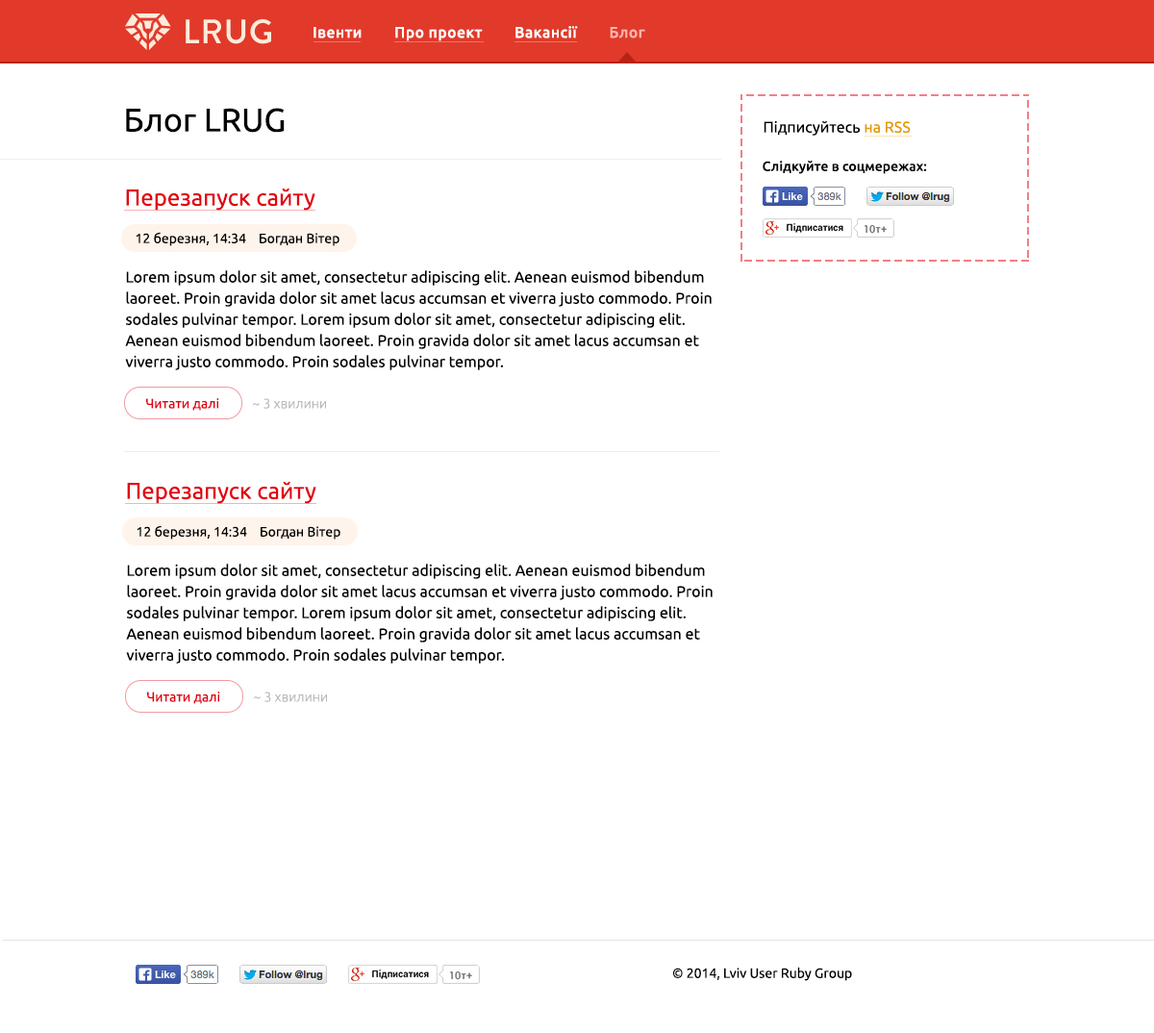
<style>
.page{position:relative;width:1154px;height:1033px;background:#ffffff}
.page>*{position:absolute;margin:0}
.t1{font:15.4px "Ubuntu-Medium";letter-spacing:0.034em;color:#ffffff}
.t2{font:15.4px "Ubuntu-Medium";letter-spacing:0.034em;color:#ffb4ad}
.t3{font:32.7px "Ubuntu";color:#000000}
.t4{font:15.4px "Ubuntu";color:#000000}
.t5{font:15.4px "Ubuntu";color:#e39b00}
.t6{font:13.5px "Ubuntu-Medium";color:#000000}
.t7{font:23.1px "Ubuntu";color:#e3000e}
.t8{font:13.5px "Ubuntu";color:#000000}
.t9{font:15.4px/21.2px "Ubuntu";color:#000000}
.t10{font:13.5px "Ubuntu";color:#e3000e}
.t11{font:13.5px "Ubuntu-Light";color:#b8b8b8}
</style>
<div class="page">
<p class="t1" style="left:314px;top:26px;width:331px;height:15px">Івенти        Про проект        Вакансії        <span class="t2">Блог</span></p>
<p class="t3" style="left:126px;top:108px;width:159px;height:25px">Блог LRUG</p>
<p class="t4" style="left:764px;top:120px;width:147px;height:16px">Підписуйтесь <span class="t5">на RSS</span></p>
<p class="t6" style="left:763px;top:161px;width:164px;height:13px">Слідкуйте в соцмережах:</p>
<p class="t7" style="left:126px;top:188px;width:189px;height:23px">Перезапуск сайту</p>
<p class="t8" style="left:136px;top:232px;width:204px;height:14px">12 березня, 14:34    Богдан Вітер</p>
<p class="t9" style="left:125px;top:270px;width:587px;height:100px">Lorem ipsum dolor sit amet, consectetur adipiscing elit. Aenean euismod bibendum laoreet. Proin gravida dolor sit amet lacus accumsan et viverra justo commodo. Proin sodales pulvinar tempor. Lorem ipsum dolor sit amet, consectetur adipiscing elit. Aenean euismod bibendum laoreet. Proin gravida dolor sit amet lacus accumsan et viverra justo commodo. Proin sodales pulvinar tempor.</p>
<p class="t10" style="left:146px;top:398px;width:73px;height:13px">Читати далі</p>
<p class="t11" style="left:253px;top:398px;width:73px;height:11px">~ 3 хвилини</p>
<p class="t7" style="left:127px;top:481px;width:189px;height:23px">Перезапуск сайту</p>
<p class="t8" style="left:137px;top:525px;width:204px;height:15px">12 березня, 14:34    Богдан Вітер</p>
<p class="t9" style="left:126px;top:564px;width:587px;height:100px">Lorem ipsum dolor sit amet, consectetur adipiscing elit. Aenean euismod bibendum laoreet. Proin gravida dolor sit amet lacus accumsan et viverra justo commodo. Proin sodales pulvinar tempor. Lorem ipsum dolor sit amet, consectetur adipiscing elit. Aenean euismod bibendum laoreet. Proin gravida dolor sit amet lacus accumsan et viverra justo commodo. Proin sodales pulvinar tempor.</p>
<p class="t10" style="left:147px;top:692px;width:73px;height:12px">Читати далі</p>
<p class="t11" style="left:254px;top:692px;width:73px;height:10px">~ 3 хвилини</p>
<p class="t8" style="left:672px;top:967px;width:180px;height:14px">© 2014, Lviv User Ruby Group</p>
</div>
